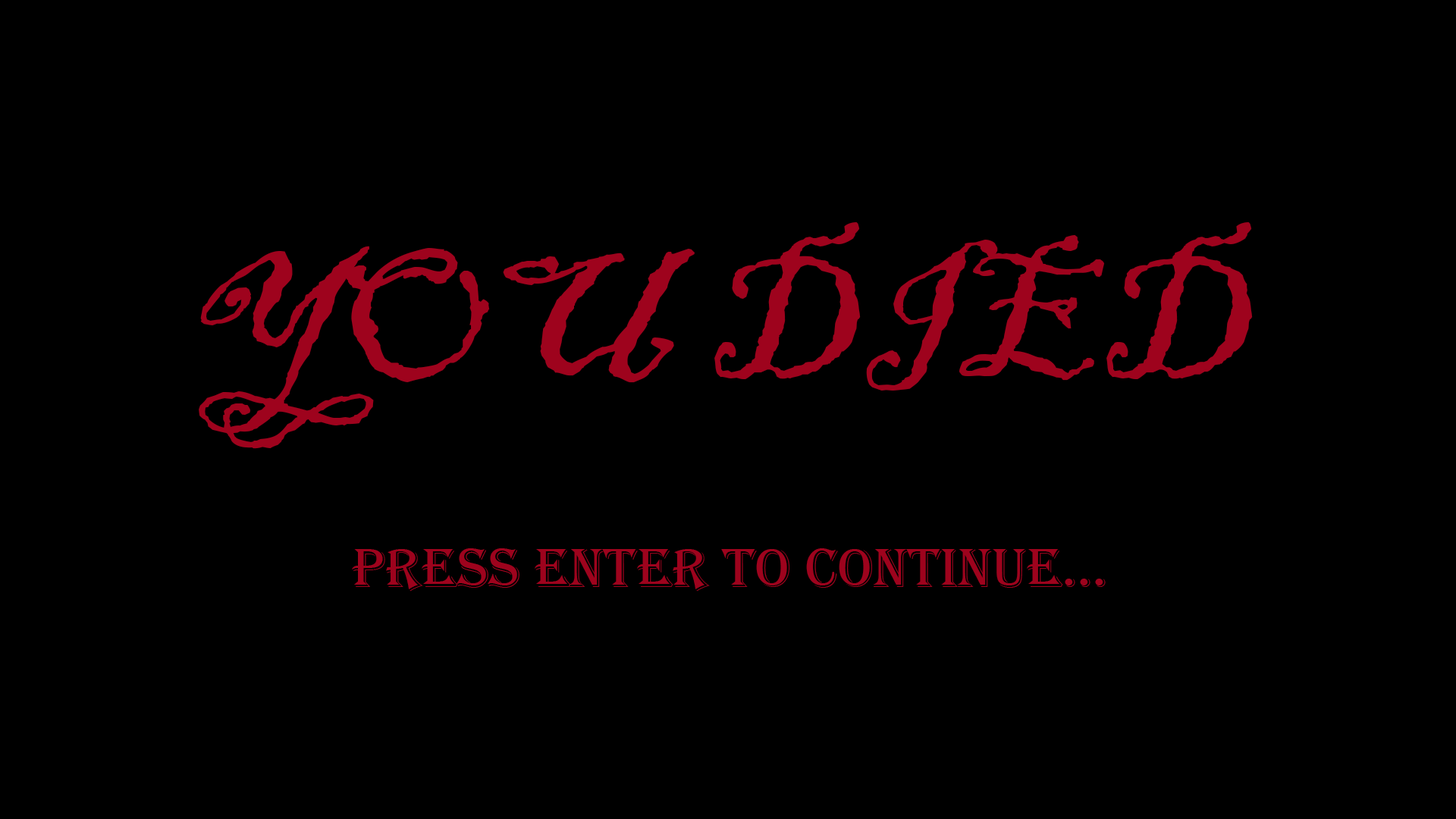
<style>
.page{position:relative;width:1456px;height:819px;background:#000000}
.page>*{position:absolute;margin:0}
.t1{font:189.6px "BlackadderITC-Regular";color:#9e031d}
.t2{font:56.9px "Algerian";color:#9e031d}
</style>
<div class="page">
<p class="t1" style="left:199px;top:222px;width:1054px;height:227px">YOU DIED</p>
<p class="t2" style="left:352px;top:548px;width:754px;height:43px">press ENTER to continue...</p>
</div>
